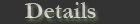
<style>
.page{position:relative;width:140px;height:24px;background:#333333}
.page>*{position:absolute;margin:0}
.t1{font:24px "Garamond-Bold";color:#c7c3c0}
</style>
<div class="page">
<p class="t1" style="left:25px;top:2px;width:71px;height:16px">Details</p>
</div>
